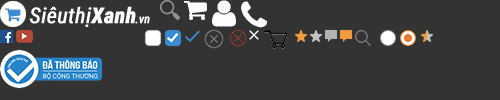
<style>
.page{position:relative;width:500px;height:100px;background:#333333}
.page>*{position:absolute;margin:0}
.t1{font:21.7px "RobotoCondensed-Italic";color:#ffffff;font-weight:bold}
.t2{font:21.7px "RobotoCondensed-BoldItalic";color:#ffffff;font-weight:bold}
.t3{font:11.9px "RobotoCondensed-Italic";color:#ffffff;font-weight:bold}
</style>
<div class="page">
<p class="t1" style="left:29px;top:6px;width:107px;height:21px">Siêuthị<span class="t2">Xanh</span></p>
<p class="t3" style="left:135px;top:16px;width:15px;height:8px">.vn</p>
</div>
